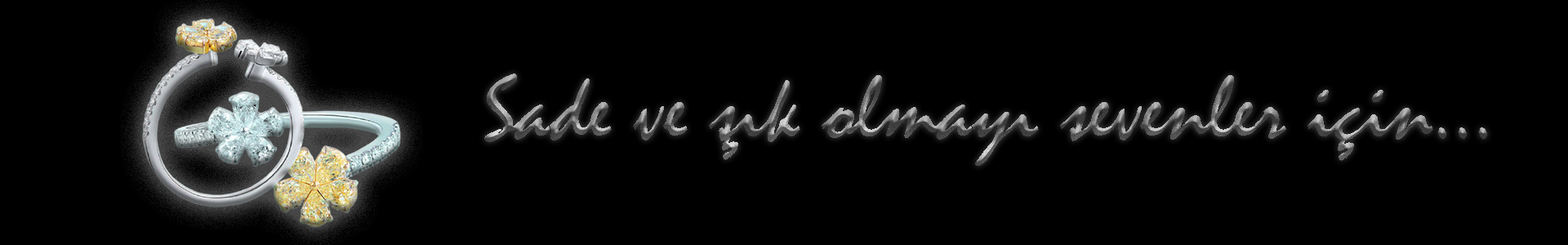
<style>
.page{position:relative;width:1568px;height:245px;background:#000000}
.page>*{position:absolute;margin:0}
.t1{font:92.6px "Mistral"}
</style>
<div class="page">
<p class="t1" style="left:484px;top:74px;width:1003px;height:92px">Sade ve şık olmayı sevenler için...</p>
</div>
